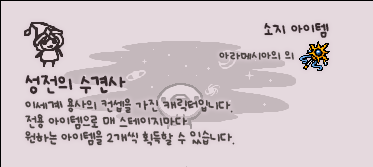
<style>
.page{position:relative;width:373px;height:167px;background:#e5d9de}
.page>*{position:absolute;margin:0}
.t1{font:12px "UhBeeSe_hyunBold";color:#372b2d}
.t2{font:12px "UhBeeSe_hyunBold";letter-spacing:-0.1em;color:#372b2d}
.t3{font:10px "UhBeeSe_hyunBold";color:#4c4442}
.t4{font:11px/16px "UhBeeSe_hyunBold";letter-spacing:-0.025em;color:#4c4442}
.t5{font:16px/23px "UhBeeSe_hyunBold";color:#372b2d}
.t6{font:16px/23px "UhBeeSe_hyunBold";letter-spacing:-0.1em;color:#372b2d}
</style>
<div class="page">
<p class="t1" style="left:264px;top:23px;width:65px;height:15px"><span class="t2">소</span>지 아이템</p>
<p class="t3" style="left:219px;top:50px;width:75px;height:10px">아라메시아의 의</p>
<p class="t4" style="left:25px;top:75px;width:210px;height:71px"><span class="t5">성전의 </span><span class="t6">수</span><span class="t5">견사<br></span>이세계 용사의 컨셉을 가진 캐릭터입니다.<br>전용 아이템으로 매 스테이지마다<br>원하는 아이템을 2개씩 획득할 수 있습니다.</p>
</div>
